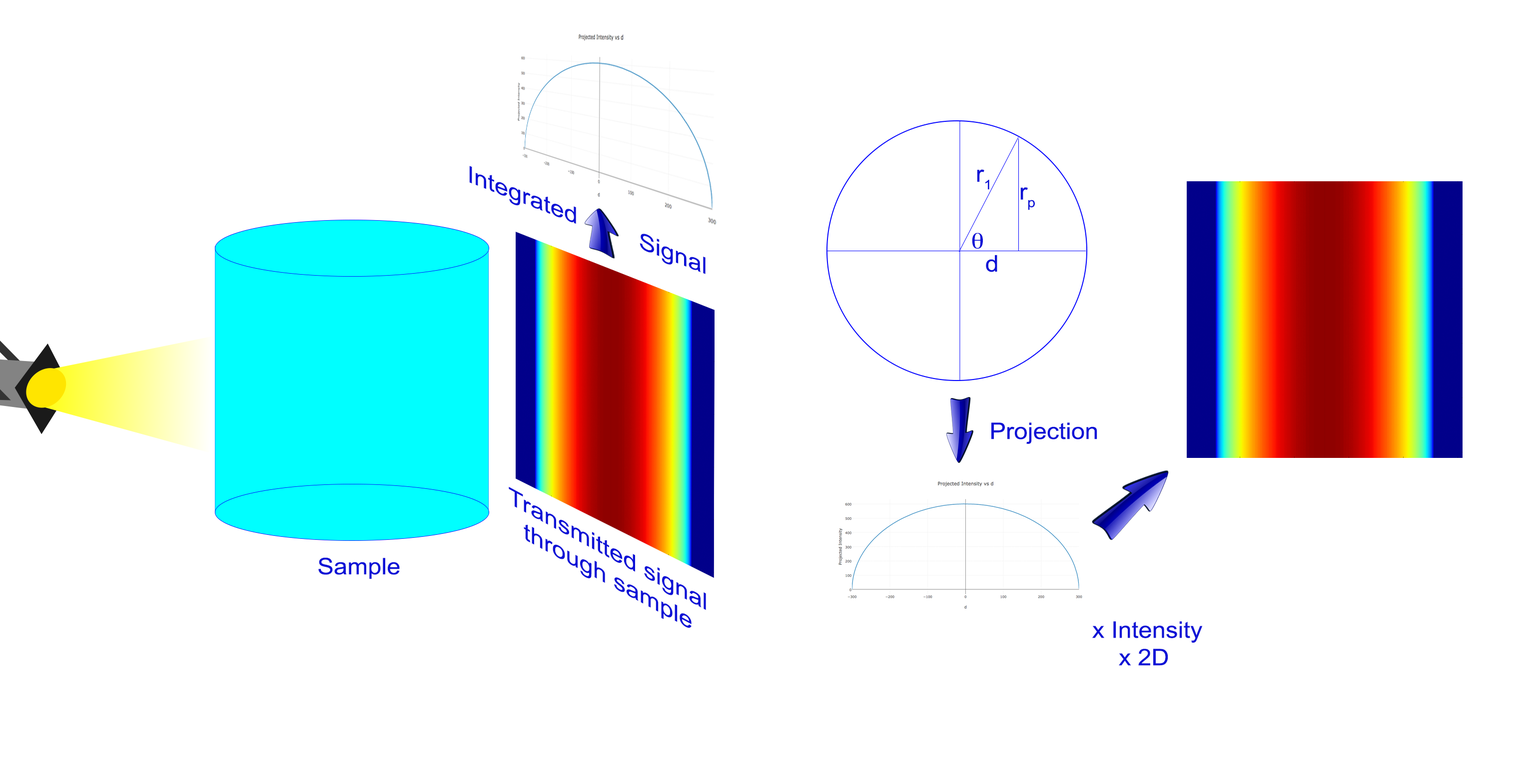
<style>
.page{position:relative;width:1526px;height:781px;background:#ffffff}
.page>*{position:absolute;margin:0}
.t1{font:22.9px "ArialMT";color:#0c11d6;scale:1.15 1}
.t2{font:22.9px "ArialMT";color:#0c11d6;scale:1.07 1}
.t3{font:22.9px "ArialMT";color:#0c11d6;scale:1.22 1}
</style>
<div class="page">
<p class="t1" style="left:469px;top:166px;width:237px;height:108px;rotate:21deg">Integrated         Signal</p>
<p class="t2" style="left:977px;top:169px;width:12px;height:21px">r1</p>
<p class="t2" style="left:1020px;top:187px;width:15px;height:23px">rp</p>
<p class="t2" style="left:986px;top:255px;width:11px;height:17px">d</p>
<p class="t2" style="left:991px;top:423px;width:106px;height:21px">Projection</p>
<p class="t3" style="left:509px;top:487px;width:197px;height:142px;text-align:center;rotate:28deg">Transmitted signal<br>through sample</p>
<p class="t2" style="left:318px;top:558px;width:82px;height:22px">Sample</p>
<p class="t2" style="left:1092px;top:622px;width:111px;height:44px;text-align:center">x Intensity<br>x 2D</p>
</div>
